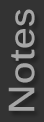
<style>
.page{position:relative;width:44px;height:122px;background:#333333}
.page>*{position:absolute;margin:0}
.t1{font:36px "Kalinga-Bold";color:#a6a6a6}
</style>
<div class="page">
<p class="t1" style="left:8px;top:9px;width:27px;height:102px;rotate:-90deg">Notes</p>
</div>
